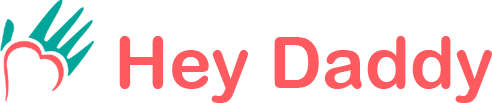
<style>
.page{position:relative;width:492px;height:103px;background:#ffffff}
.page>*{position:absolute;margin:0}
.t1{font:72px "ArialRoundedMTBold";color:#ff5a5f}
</style>
<div class="page">
<p class="t1" style="left:119px;top:36px;width:373px;height:67px">Hey Daddy</p>
</div>
